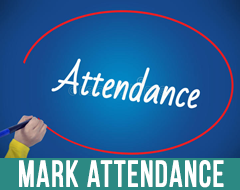
<style>
.page{position:relative;width:240px;height:190px}
.page>*{position:absolute;margin:0}
.t1{font:36.6px "BebasNeueRegular";letter-spacing:0.04em;color:#ffffff;font-weight:bold;scale:0.84 1}
</style>
<div class="page">
<p class="t1" style="left:19px;top:160px;width:205px;height:28px">mark attendance</p>
</div>
